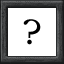
<style>
.page{position:relative;width:64px;height:64px;background:#ffffff}
.page>*{position:absolute;margin:0}
.t1{font:36px "BookmanOldStyle";color:#000000}
</style>
<div class="page">
<p class="t1" style="left:23px;top:19px;width:18px;height:26px">?</p>
</div>
